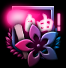
<style>
.page{position:relative;width:66px;height:68px;background:#000000}
.page>*{position:absolute;margin:0}
.t1{font:24px "STXingkai";letter-spacing:-0.42em;font-weight:bold}
.t2{font:24px "STXingkai";letter-spacing:-0.2em;font-weight:bold}
.t3{font:24px "HYPixel-11px-U";letter-spacing:-0.2em;font-weight:bold}
</style>
<div class="page">
<p class="t1" style="left:24px;top:13px;width:37px;height:21px">自<span class="t2">由</span><span class="t3">！</span></p>
</div>
